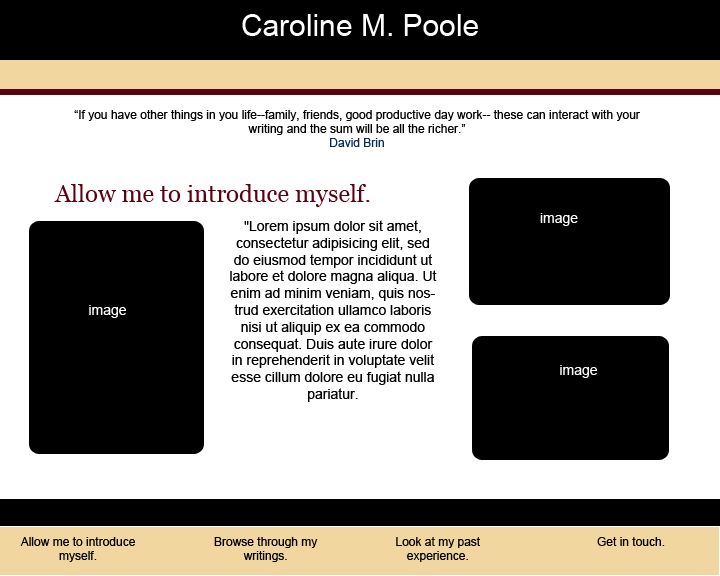
<style>
.page{position:relative;width:720px;height:576px;background:#ffffff}
.page>*{position:absolute;margin:0}
.t1{font:30px "ArialMT";color:#ffffff}
.t2{font:12px "ArialMT";color:#000000}
.t3{font:12px "ArialMT";color:#082b64}
.t4{font:24px "Georgia";color:#5b0311}
.t5{font:14px "ArialMT";color:#000000}
.t6{font:14px "ArialMT";color:#ffffff}
</style>
<div class="page">
<p class="t1" style="left:242px;top:14px;width:236px;height:22px">Caroline M. Poole</p>
<p class="t2" style="left:74px;top:110px;width:566px;height:37px;text-align:center">“If you have other things in you life--family, friends, good productive day work-- these can interact with your writing and the sum will be all the richer.”<br><span class="t3">David Brin</span></p>
<p class="t4" style="left:54px;top:184px;width:316px;height:23px">Allow me to introduce myself.</p>
<p class="t5" style="left:230px;top:220px;width:207px;height:182px;text-align:center">"Lorem ipsum dolor sit amet, consectetur adipisicing elit, sed do eiusmod tempor incididunt ut labore et dolore magna aliqua. Ut enim ad minim veniam, quis nostrud exercitation ullamco laboris nisi ut aliquip ex ea commodo consequat. Duis aute irure dolor in reprehenderit in voluptate velit esse cillum dolore eu fugiat nulla pariatur.</p>
<p class="t6" style="left:540px;top:213px;width:38px;height:13px">image</p>
<p class="t6" style="left:89px;top:305px;width:37px;height:13px">image</p>
<p class="t6" style="left:560px;top:365px;width:37px;height:13px">image</p>
<p class="t2" style="left:20px;top:537px;width:115px;height:25px;text-align:center">Allow me to introduce myself.</p>
<p class="t2" style="left:214px;top:537px;width:104px;height:25px;text-align:center">Browse through my writings.</p>
<p class="t2" style="left:396px;top:537px;width:84px;height:25px;text-align:center">Look at my past experience.</p>
<p class="t2" style="left:597px;top:537px;width:68px;height:9px">Get in touch.</p>
</div>
